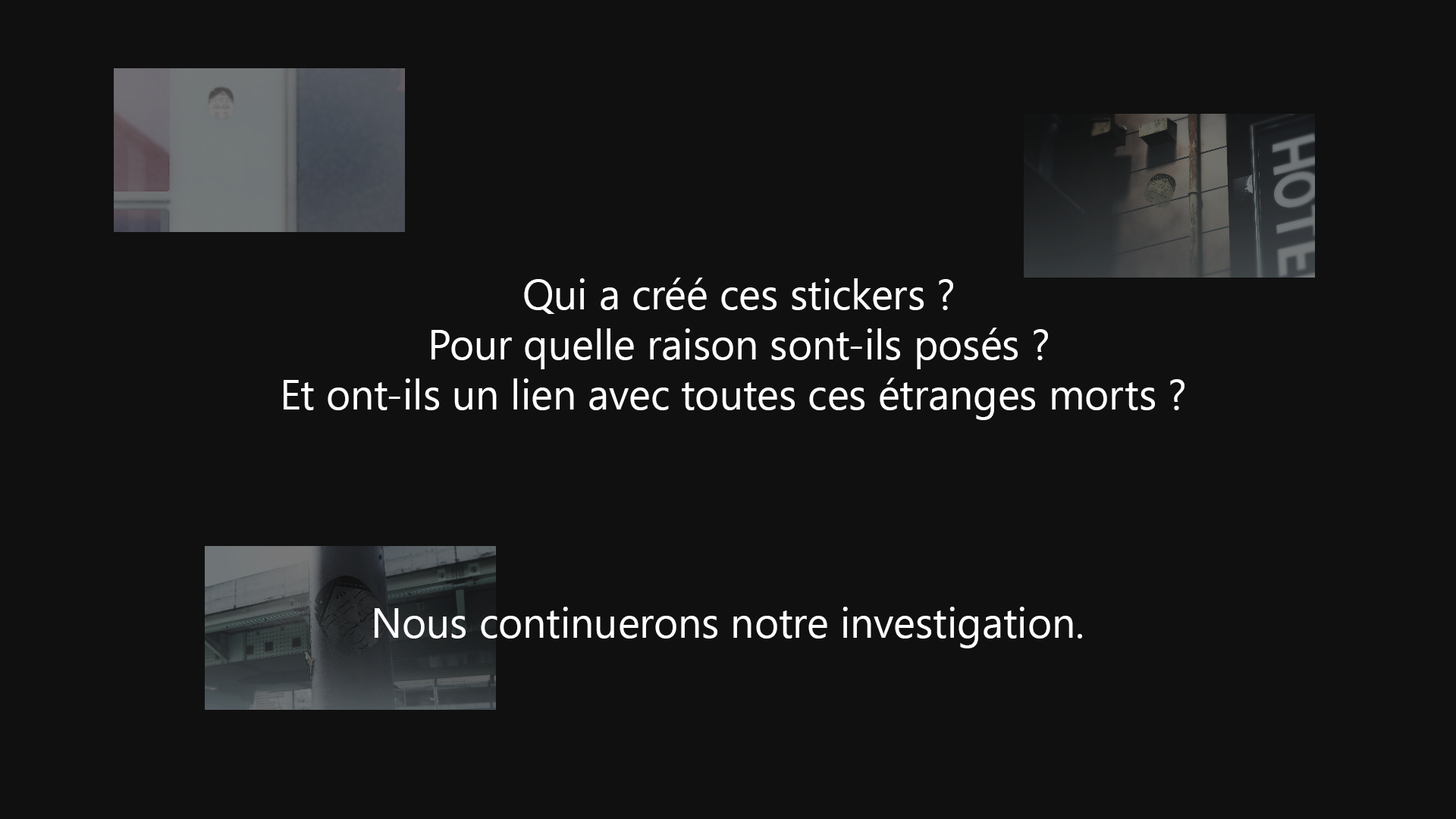
<style>
.page{position:relative;width:1456px;height:819px;background:#101010}
.page>*{position:absolute;margin:0}
.t1{font:41.7px "SegoeUIHistoric";color:#ffffff}
</style>
<div class="page">
<p class="t1" style="left:284px;top:278px;width:901px;height:142px;text-align:center">Qui a créé ces stickers ?<br>Pour quelle raison sont-ils posés ?<br>Et ont-ils un lien avec toutes ces étranges morts ?</p>
<p class="t1" style="left:375px;top:607px;width:707px;height:41px">Nous continuerons notre investigation.</p>
</div>
